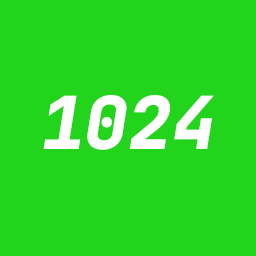
<style>
.page{position:relative;width:256px;height:256px;background:#22d51c}
.page>*{position:absolute;margin:0}
.t1{font:72.9px "JetBrainsMono-ExtraBoldItalic";color:#ffffff}
</style>
<div class="page">
<p class="t1" style="left:43px;top:95px;width:171px;height:55px">1024</p>
</div>
